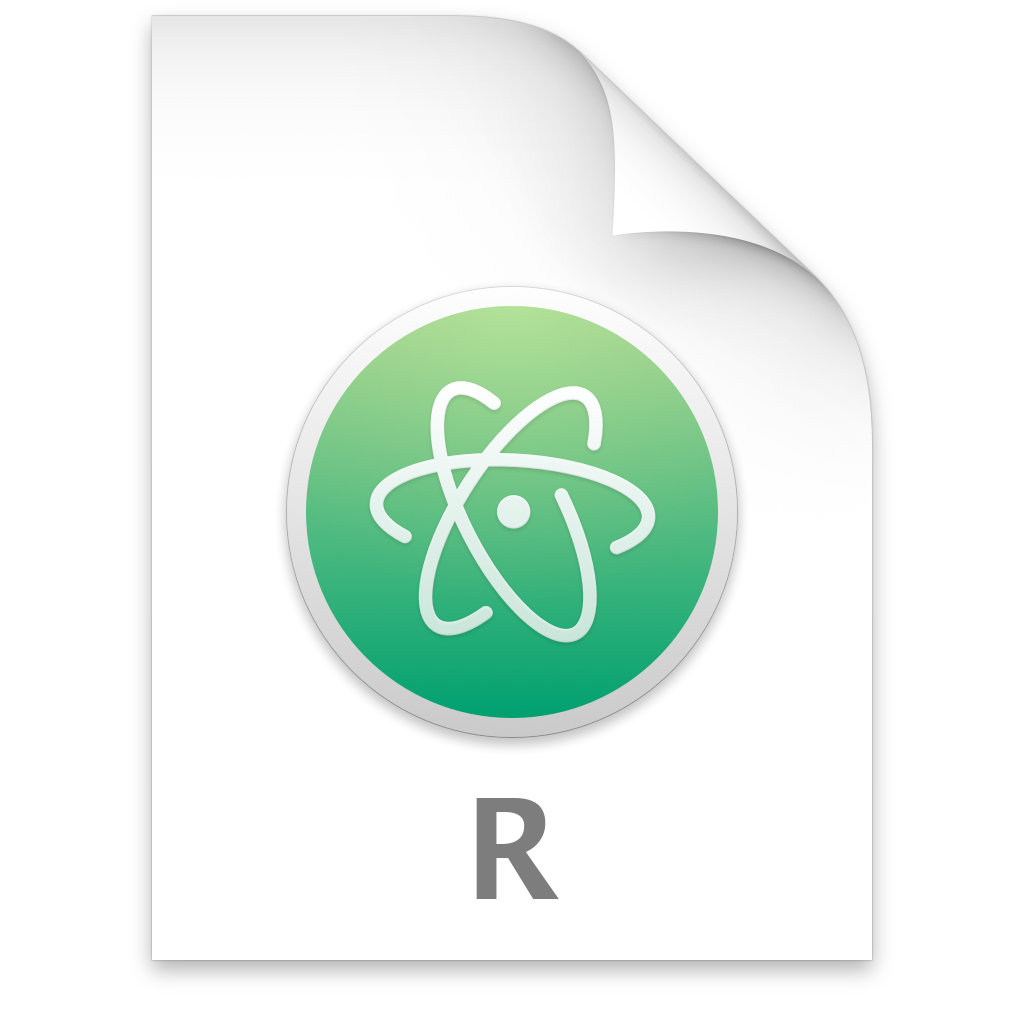
<style>
.page{position:relative;width:1024px;height:1024px;background:#ffffff}
.page>*{position:absolute;margin:0}
.t1{font:140px "LucidaGrande-Bold";color:#7d7d7d}
</style>
<div class="page">
<p class="t1" style="left:476px;top:798px;width:83px;height:101px">R</p>
</div>
